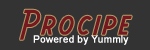
<style>
.page{position:relative;width:150px;height:50px;background:#333333}
.page>*{position:absolute;margin:0}
.t1{font:36px "AeroviasBrasilNF";letter-spacing:0.075em;color:#751820;font-weight:bold}
.t2{font:10px "ArialMT";color:#ffffff;font-weight:bold}
</style>
<div class="page">
<p class="t1" style="left:20px;top:9px;width:112px;height:31px">Procipe</p>
<p class="t2" style="left:33px;top:35px;width:96px;height:10px">Powered by Yummly</p>
</div>
